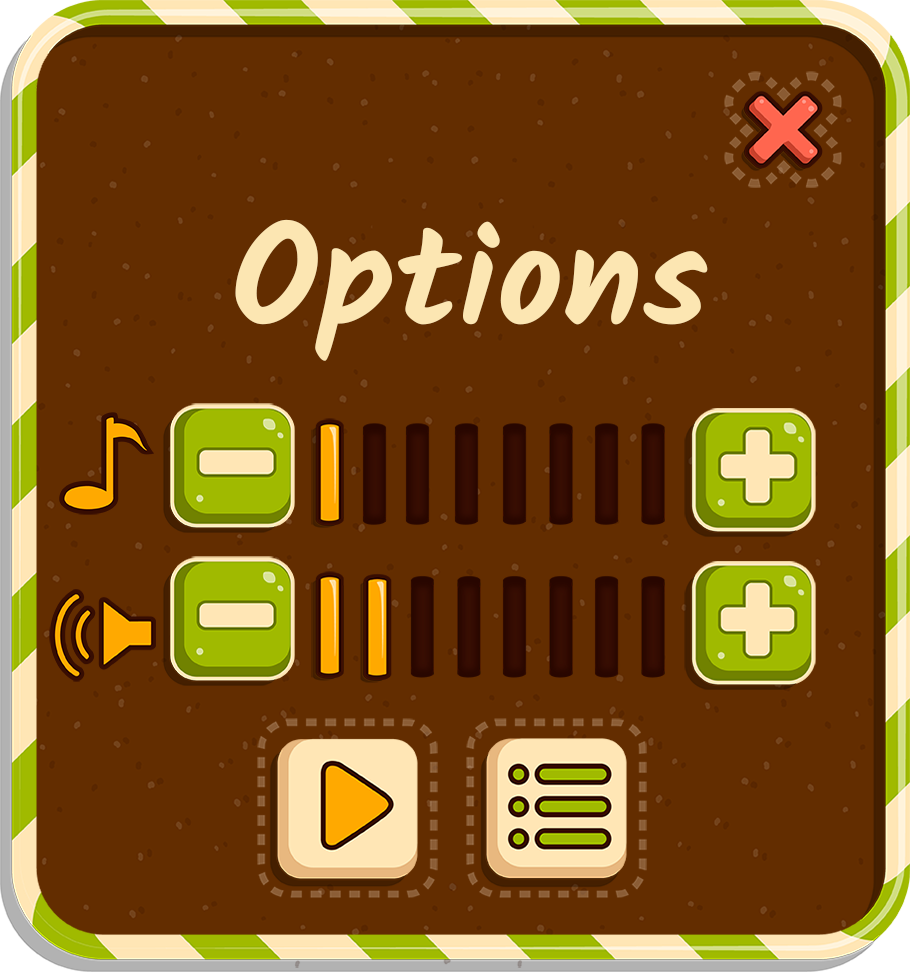
<style>
.page{position:relative;width:910px;height:972px;background:#632d00}
.page>*{position:absolute;margin:0}
.t1{font:142.2px "Kalam-Bold";color:#fce6b2}
</style>
<div class="page">
<p class="t1" style="left:235px;top:219px;width:473px;height:142px">Options</p>
</div>
